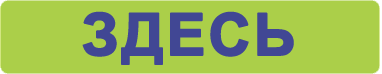
<style>
.page{position:relative;width:382px;height:74px;background:#abcf49}
.page>*{position:absolute;margin:0}
.t1{font:58.3px "Arial-BoldMT";letter-spacing:0.025em;color:#414794;text-transform:uppercase;font-weight:bold}
</style>
<div class="page">
<p class="t1" style="left:82px;top:11px;width:212px;height:54px">ЗДЕСЬ</p>
</div>
